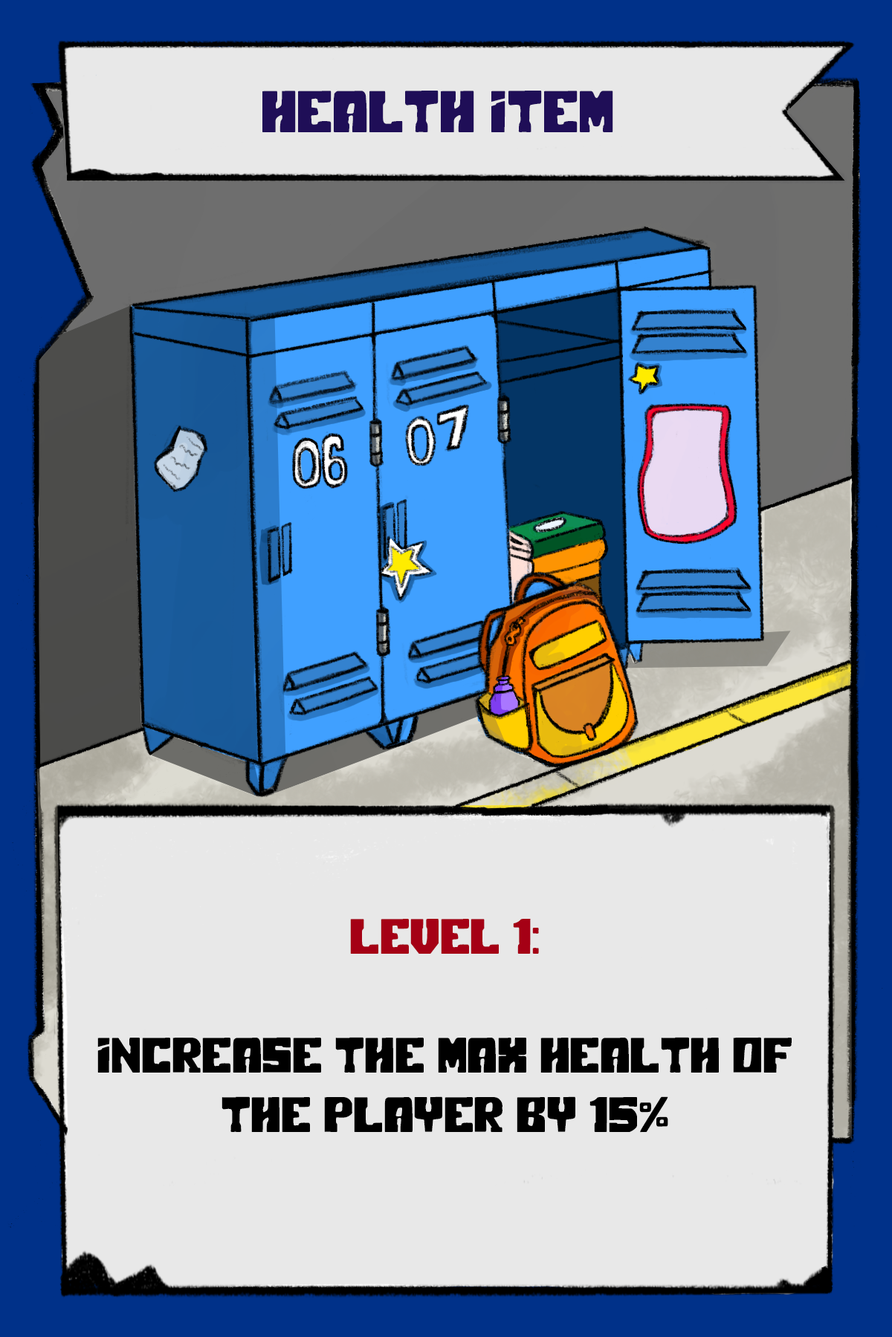
<style>
.page{position:relative;width:892px;height:1337px;background:#e8e8e8}
.page>*{position:absolute;margin:0}
.t1{font:58.8px "PolarPress";color:#1f0e57}
.t2{font:49.5px "PolarPress";color:#000000}
.t3{font:49.5px "PolarPress";color:#a50015}
</style>
<div class="page">
<p class="t1" style="left:262px;top:91px;width:351px;height:41px">Health item</p>
<p class="t2" style="left:97px;top:919px;width:694px;height:214px;text-align:center"><span class="t3">LEVEL 1:<br></span><br>Increase the max health of the player by 15%</p>
</div>
